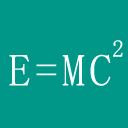
<style>
.page{position:relative;width:128px;height:128px;background:#009688}
.page>*{position:absolute;margin:0}
.t1{font:24px "SimSun";letter-spacing:0.1em;color:#f7fdfc}
.t2{font:45px "SimSun";letter-spacing:0.1em;color:#f7fdfc}
</style>
<div class="page">
<p class="t1" style="left:113px;top:40px;width:10px;height:17px">2</p>
<p class="t2" style="left:9px;top:54px;width:102px;height:32px">E=MC</p>
</div>
